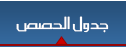
<style>
.page{position:relative;width:126px;height:48px}
.page>*{position:absolute;margin:0}
.t1{font:20.4px "SC_KHALID";color:#ffffff;scale:0.9 1}
</style>
<div class="page">
<p class="t1" style="left:16px;top:16px;width:93px;height:17px">جدول الحصص</p>
</div>
